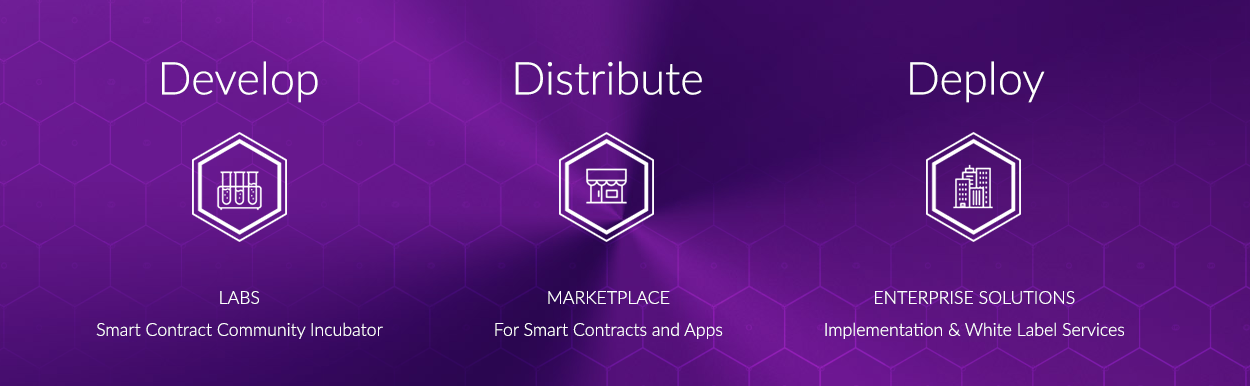
<style>
.page{position:relative;width:1250px;height:386px}
.page>*{position:absolute;margin:0}
.t1{font:45px "Lato-Light";color:#ffffff}
.t2{font:17.7px/32px "Lato-Light";color:#ffffff}
.t3{font:17.7px "Lato-Light";color:#ffffff}
</style>
<div class="page">
<p class="t1" style="left:162px;top:61px;width:156px;height:42px">Develop</p>
<p class="t1" style="left:515px;top:61px;width:187px;height:34px">Distribute</p>
<p class="t1" style="left:910px;top:61px;width:135px;height:42px">Deploy</p>
<p class="t2" style="left:96px;top:291px;width:287px;height:48px;text-align:center"><span class="t3">LABS<br></span>Smart Contract Community Incubator</p>
<p class="t2" style="left:495px;top:291px;width:228px;height:48px;text-align:center"><span class="t3">MARKETPLACE<br></span>For Smart Contracts and Apps</p>
<p class="t2" style="left:825px;top:291px;width:299px;height:48px;text-align:center"><span class="t3">ENTERPRISE SOLUTIONS<br></span>Implementation &amp; White Label Services</p>
</div>
